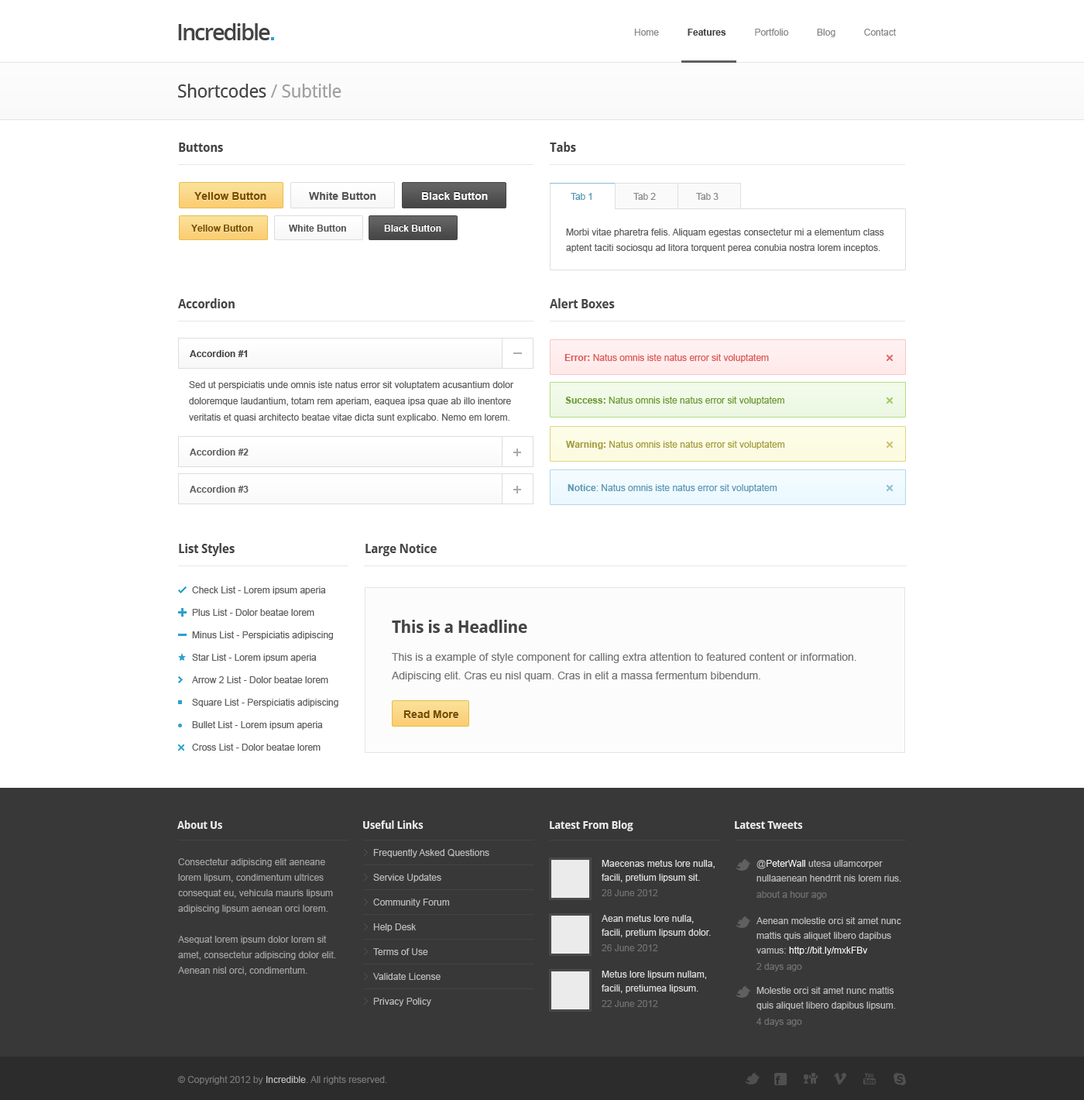
<style>
.page{position:relative;width:1084px;height:1100px;background:#ffffff}
.page>*{position:absolute;margin:0}
.t1{font:22.5px "OpenSans-Semibold";letter-spacing:-0.07em;color:#444444}
.t2{font:9.3px "ArialMT";color:#888888}
.t3{font:9.3px "Arial-BoldMT";color:#444444}
.t4{font:18.6px "DroidSans";letter-spacing:-0.025em;color:#444444}
.t5{font:18.6px "DroidSans";letter-spacing:-0.025em;color:#a0a0a0}
.t6{font:12.4px "DroidSans-Bold";letter-spacing:-0.025em;color:#444444}
.t7{font:10.8px "Arial-BoldMT";color:#754c00}
.t8{font:10.8px "Arial-BoldMT";color:#444444}
.t9{font:10.8px "Arial-BoldMT";color:#ffffff}
.t10{font:9.3px "ArialMT";letter-spacing:-0.01em;color:#5597b2}
.t11{font:9.3px "ArialMT";letter-spacing:-0.01em;color:#888888}
.t12{font:9.3px "Arial-BoldMT";color:#754c00}
.t13{font:9.3px "Arial-BoldMT";color:#ffffff}
.t14{font:9.3px/15.5px "ArialMT";color:#606060}
.t15{font:12.4px "DroidSans-Bold";letter-spacing:-0.025em;color:#464646}
.t16{font:9.3px "ArialMT";color:#e77676}
.t17{font:9.3px "Arial-BoldMT";color:#dc4343}
.t18{font:9.3px/16.3px "ArialMT";color:#606060}
.t19{font:9.3px "ArialMT";color:#6c9a36}
.t20{font:9.3px "Arial-BoldMT";color:#6c9a36}
.t21{font:9.3px "Arial-BoldMT";color:#606060}
.t22{font:9.3px "ArialMT";color:#a39d3f}
.t23{font:9.3px "Arial-BoldMT";color:#a39d3f}
.t24{font:9.3px "ArialMT";color:#5f99b6}
.t25{font:9.3px "Arial-BoldMT";color:#5f99b6}
.t26{font:9.3px/22.5px "ArialMT";color:#606060}
.t27{font:10.8px/27.9px "ArialMT";color:#777777}
.t28{font:17px/23.2px "DroidSans-Bold";letter-spacing:-0.025em;color:#444444}
.t29{font:10.8px/18.6px "ArialMT";color:#777777}
.t30{font:10.8px "DroidSans-Bold";letter-spacing:-0.025em;color:#ffffff}
.t31{font:9.3px/24.8px "ArialMT";color:#bbbbbb}
.t32{font:9.3px/15.5px "ArialMT";color:#a1a1a1}
.t33{font:9.3px/13.9px "ArialMT";color:#dddddd}
.t34{font:9.3px/15.5px "ArialMT";color:#707070}
.t35{font:9.3px/14.7px "ArialMT";color:#bbbbbb}
.t36{font:9.3px/14.7px "ArialMT";color:#eeeeee}
.t37{font:9.3px/16.3px "ArialMT";color:#707070}
.t38{font:9.3px/14.7px "ArialMT";color:#aaaaaa}
.t39{font:9.3px "ArialMT";color:#777777}
.t40{font:9.3px "ArialMT";color:#bbbbbb}
</style>
<div class="page">
<p class="t1" style="left:178px;top:23px;width:92px;height:17px">Incredible</p>
<p class="t2" style="left:634px;top:29px;width:262px;height:8px">Home           <span class="t3">Features           </span>Portfolio           Blog           Contact</p>
<p class="t4" style="left:178px;top:84px;width:164px;height:14px">Shortcodes <span class="t5">/ Subtitle</span></p>
<p class="t6" style="left:179px;top:143px;width:44px;height:9px">Buttons</p>
<p class="t6" style="left:550px;top:142px;width:26px;height:10px">Tabs</p>
<p class="t7" style="left:194px;top:192px;width:72px;height:8px">Yellow Button</p>
<p class="t8" style="left:309px;top:192px;width:67px;height:8px">White Button</p>
<p class="t9" style="left:422px;top:192px;width:66px;height:8px">Black Button</p>
<p class="t10" style="left:571px;top:193px;width:21px;height:7px">Tab 1</p>
<p class="t11" style="left:634px;top:193px;width:22px;height:7px">Tab 2</p>
<p class="t11" style="left:696px;top:193px;width:23px;height:7px">Tab 3</p>
<p class="t12" style="left:191px;top:225px;width:62px;height:7px">Yellow Button</p>
<p class="t3" style="left:289px;top:225px;width:57px;height:7px">White Button</p>
<p class="t13" style="left:384px;top:225px;width:57px;height:7px">Black Button</p>
<p class="t14" style="left:566px;top:228px;width:318px;height:24px">Morbi vitae pharetra felis. Aliquam egestas consectetur mi a elementum class aptent taciti sociosqu ad litora torquent perea conubia nostra lorem inceptos.</p>
<p class="t6" style="left:178px;top:298px;width:57px;height:10px">Accordion</p>
<p class="t15" style="left:550px;top:298px;width:65px;height:10px">Alert Boxes</p>
<p class="t3" style="left:190px;top:350px;width:58px;height:7px">Accordion #1</p>
<p class="t16" style="left:565px;top:354px;width:204px;height:8px"><span class="t17">Error: </span>Natus omnis iste natus error sit voluptatem</p>
<p class="t18" style="left:189px;top:381px;width:325px;height:41px">Sed ut perspiciatis unde omnis iste natus error sit voluptatem acusantium dolor doloremque laudantium, totam rem aperiam, eaquea ipsa quae ab illo inentore veritatis et quasi architecto beatae vitae dicta sunt explicabo. Nemo em lorem.</p>
<p class="t19" style="left:565px;top:397px;width:220px;height:8px"><span class="t20">Success:</span> Natus omnis iste natus error sit voluptatem</p>
<p class="t21" style="left:190px;top:448px;width:59px;height:7px">Accordion #2</p>
<p class="t22" style="left:566px;top:441px;width:219px;height:8px"><span class="t23">Warning: </span>Natus omnis iste natus error sit voluptatem</p>
<p class="t21" style="left:190px;top:486px;width:59px;height:7px">Accordion #3</p>
<p class="t24" style="left:568px;top:484px;width:210px;height:9px"><span class="t25">Notice</span>: Natus omnis iste natus error sit voluptatem</p>
<p class="t6" style="left:179px;top:543px;width:56px;height:13px"><span class="t15">L</span>ist Styles</p>
<p class="t15" style="left:366px;top:544px;width:71px;height:12px">Large Notice</p>
<p class="t26" style="left:192px;top:586px;width:146px;height:164px">Check List - Lorem ipsum aperia<br>Plus List - Dolor beatae lorem<br>Minus List - Perspiciatis adipiscing<br>Star List - Lorem ipsum aperia<br>Arrow 2 List - Dolor beatae lorem<br>Square List - Perspiciatis adipiscing<br>Bullet List - Lorem ipsum aperia<br>Cross List - Dolor beatae lorem</p>
<p class="t27" style="left:392px;top:620px;width:465px;height:62px"><span class="t28">This is a Headline<br></span>This is a example of style component for calling extra attention to featured content or information. <br><span class="t29">Adipiscing elit. Cras eu nisl quam. Cras in elit a massa fermentum bibendum.</span></p>
<p class="t7" style="left:404px;top:710px;width:55px;height:8px">Read More</p>
<p class="t30" style="left:177px;top:820px;width:45px;height:9px;opacity:0.9">About Us</p>
<p class="t30" style="left:363px;top:820px;width:61px;height:9px;opacity:0.9">Useful Links</p>
<p class="t30" style="left:550px;top:820px;width:84px;height:11px;opacity:0.9">Latest From Blog</p>
<p class="t30" style="left:735px;top:821px;width:68px;height:8px;opacity:0.9">Latest Tweets</p>
<p class="t31" style="left:373px;top:849px;width:116px;height:157px">Frequently Asked Questions<br>Service Updates<br>Community Forum<br>Help Desk<br>Terms of Use<br>Validate License<br>Privacy Policy</p>
<p class="t32" style="left:178px;top:858px;width:158px;height:117px">Consectetur adipiscing elit aeneane lorem lipsum, condimentum ultrices consequat eu, vehicula mauris lipsum adipiscing lipsum aenean orci lorem.<br> <br>Asequat lorem ipsum dolor lorem sit amet, consectetur adipiscing dolor elit. Aenean nisl orci, condimentum.</p>
<p class="t33" style="left:602px;top:860px;width:113px;height:36px">Maecenas metus lore nulla, facili, pretium lipsum sit.<br><span class="t34">28 June 2012</span></p>
<p class="t35" style="left:757px;top:860px;width:144px;height:39px">@<span class="t36">PeterWall </span>utesa ullamcorper nullaaenean hendrrit nis lorem rius.<br><span class="t37">about a hour ago</span></p>
<p class="t33" style="left:602px;top:915px;width:109px;height:36px">Aean metus lore nulla, facili, pretium lipsum dolor.<br><span class="t34">26 June 2012</span></p>
<p class="t35" style="left:757px;top:917px;width:144px;height:54px">Aenean molestie orci sit amet nunc mattis quis aliquet libero dapibus vamus: <span class="t36">http://bit.ly/mxkFBv<br></span><span class="t37">2 days ago</span></p>
<p class="t33" style="left:602px;top:970px;width:105px;height:37px">Metus lore lipsum nullam, facili, pretiumea lipsum.<br><span class="t34">22 June 2012</span></p>
<p class="t35" style="left:757px;top:987px;width:139px;height:39px">Molestie orci sit amet nunc mattis quis aliquet libero dapibus lipsum<span class="t38">.<br></span><span class="t37">4 days ago</span></p>
<p class="t39" style="left:177px;top:1076px;width:210px;height:8px">© Copyright 2012 by <span class="t40">Incredible</span>. All rights reserved.</p>
</div>
